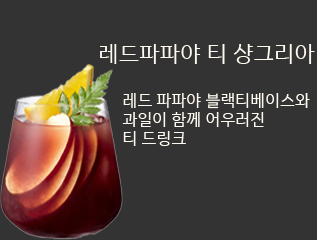
<style>
.page{position:relative;width:317px;height:240px;background:#333333}
.page>*{position:absolute;margin:0}
.t1{font:22px "HanSantteutDotumRegular";color:#fffaf0;text-transform:uppercase}
.t2{font:16px "HanSantteutDotumRegular";color:#fffaf0;text-transform:uppercase}
</style>
<div class="page">
<p class="t1" style="left:100px;top:44px;width:215px;height:20px">레드파파야 티 샹그리아</p>
<p class="t2" style="left:122px;top:93px;width:188px;height:53px">레드 파파야 블랙티베이스와<br>과일이 함께 어우러진<br>티 드링크</p>
</div>
